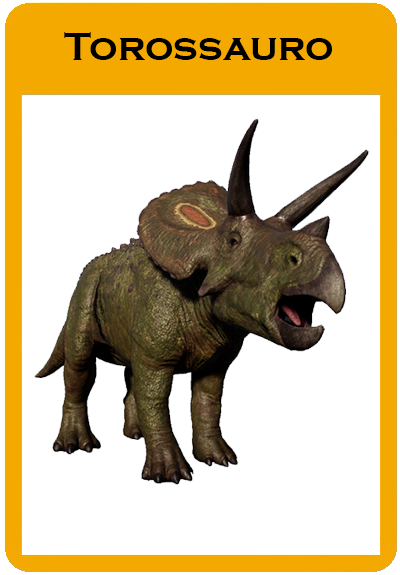
<style>
.page{position:relative;width:400px;height:575px;background:#ffffff}
.page>*{position:absolute;margin:0}
.t1{font:40px "CopperplateGothic-Bold";color:#000000}
</style>
<div class="page">
<p class="t1" style="left:64px;top:32px;width:268px;height:28px">Torossauro</p>
</div>
